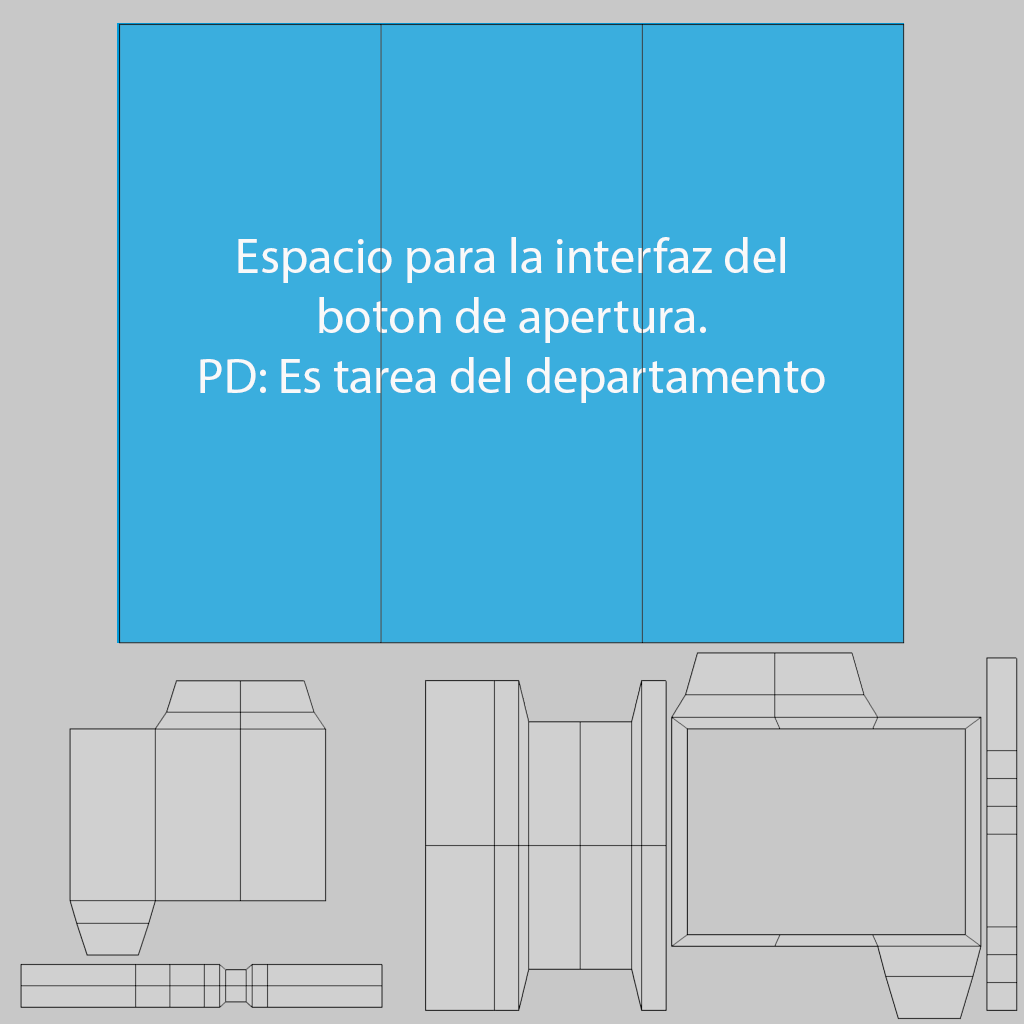
<style>
.page{position:relative;width:1024px;height:1024px;background:#3aaede}
.page>*{position:absolute;margin:0}
.t1{font:12px "MyriadPro-Regular";color:#ffffff}
</style>
<div class="page">
<p class="t1" style="left:200px;top:237px;width:625px;height:166px;text-align:center">Espacio para la interfaz del boton de apertura.<br>PD: Es tarea del departamento de GUI.</p>
</div>
